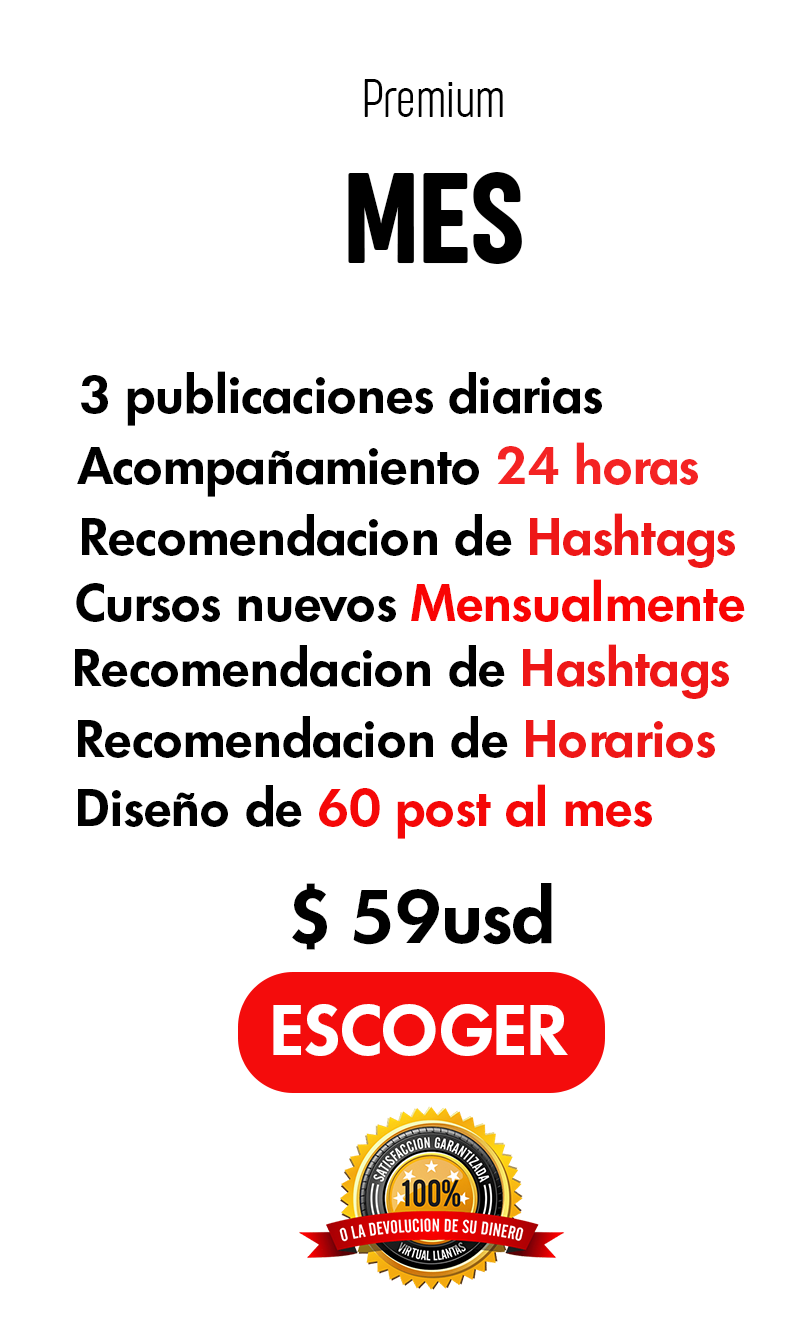
<style>
.page{position:relative;width:803px;height:1328px;background:#ffffff}
.page>*{position:absolute;margin:0}
.t1{font:55.6px "SugoProClassicTrial-ExtraLight";letter-spacing:0.004em;color:#000000}
.t2{font:133.2px "SugoProClassicTrial-Regular";letter-spacing:0.004em;color:#000000}
.t3{font:50.8px "Limerick-DemiBold";letter-spacing:0.004em;color:#000000}
.t4{font:50.8px "Limerick-DemiBold";letter-spacing:0.004em;color:#f42323}
.t5{font:50.8px "Limerick-DemiBold";letter-spacing:0.004em;color:#ee1717}
.t6{font:50.8px "Limerick-DemiBold";letter-spacing:0.004em;color:#f90404}
.t7{font:50.8px "Limerick-DemiBold";letter-spacing:0.004em;color:#f50808}
.t8{font:73.8px "Limerick-DemiBold";letter-spacing:0.004em;color:#000000}
.t9{font:69.4px "Limerick-DemiBold";letter-spacing:0.004em;color:#ffffff}
</style>
<div class="page">
<p class="t1" style="left:364px;top:79px;width:139px;height:38px">Premium</p>
<p class="t2" style="left:348px;top:172px;width:174px;height:92px">MES</p>
<p class="t3" style="left:81px;top:371px;width:521px;height:55px">3 publicaciones diarias</p>
<p class="t3" style="left:77px;top:442px;width:621px;height:55px">Acompañamiento <span class="t4">24 horas</span></p>
<p class="t3" style="left:82px;top:513px;width:653px;height:55px">Recomendacion de <span class="t5">Hashtags</span></p>
<p class="t3" style="left:76px;top:579px;width:669px;height:43px">Cursos nuevos <span class="t6">Mensualmente</span></p>
<p class="t3" style="left:75px;top:644px;width:654px;height:55px">Recomendacion de <span class="t5">Hashtags</span></p>
<p class="t3" style="left:78px;top:716px;width:637px;height:42px">Recomendacion de <span class="t5">Horarios</span></p>
<p class="t7" style="left:78px;top:784px;width:574px;height:55px"><span class="t3">Diseño de </span>60 post al mes</p>
<p class="t8" style="left:292px;top:883px;width:260px;height:67px">$ 59usd</p>
<p class="t9" style="left:273px;top:1004px;width:295px;height:52px">ESCOGER</p>
</div>
